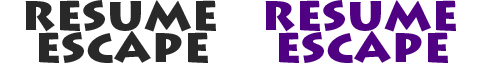
<style>
.page{position:relative;width:480px;height:64px;background:#ffffff}
.page>*{position:absolute;margin:0}
.t1{font:48px "LithosPro-Black";color:#292929}
.t2{font:48px "LithosPro-Black";color:#500083}
</style>
<div class="page">
<p class="t1" style="left:25px;top:0px;width:191px;height:32px">resume</p>
<p class="t2" style="left:265px;top:0px;width:191px;height:32px">resume</p>
<p class="t1" style="left:39px;top:31px;width:169px;height:32px">escape</p>
<p class="t2" style="left:279px;top:31px;width:169px;height:32px">escape</p>
</div>
